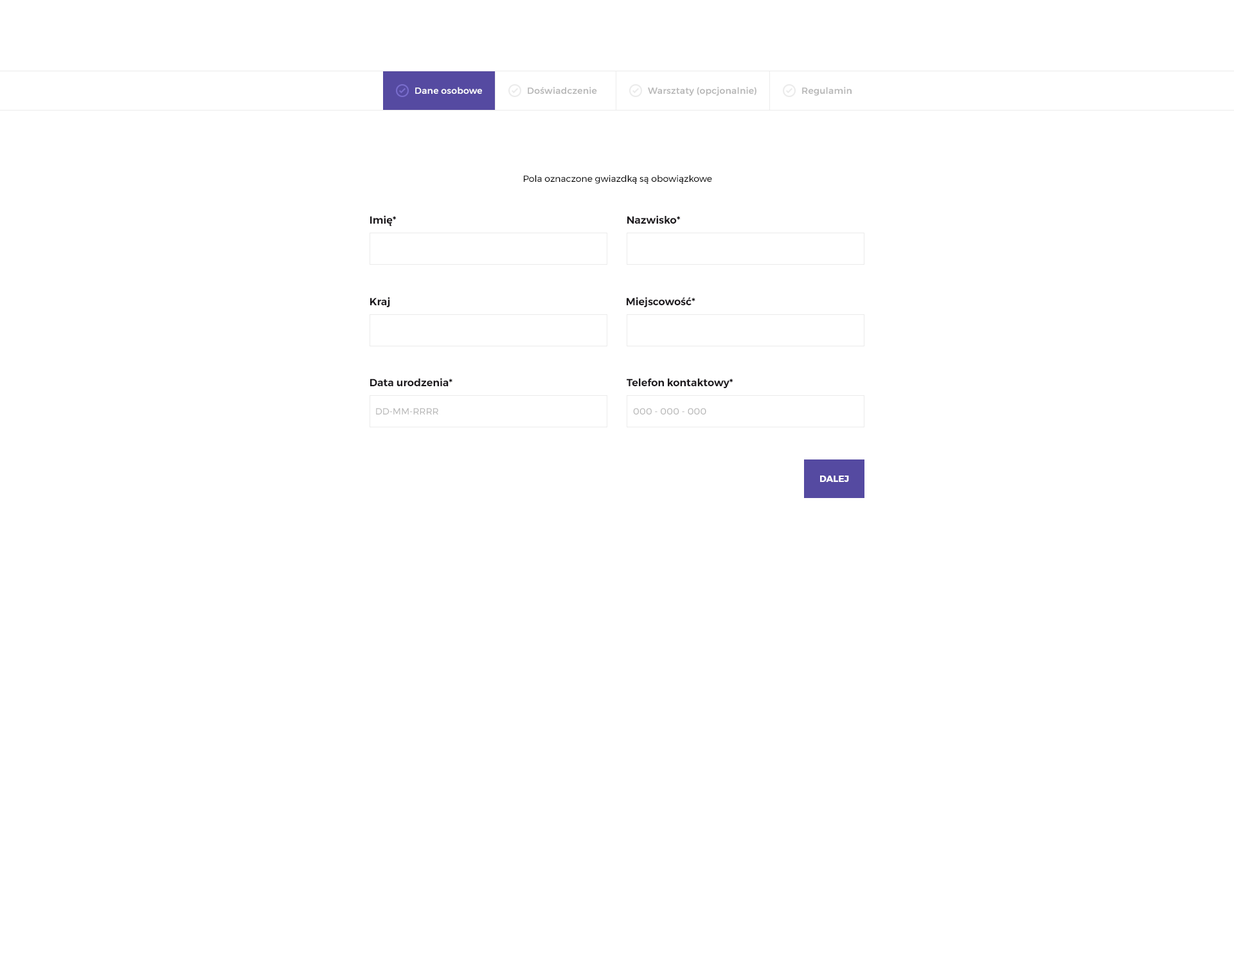
<style>
.page{position:relative;width:1234px;height:980px;background:#ffffff}
.page>*{position:absolute;margin:0}
.t1{font:9px "Montserrat-Medium";letter-spacing:0.015em;color:#ffffff}
.t2{font:9px "Montserrat-Medium";letter-spacing:0.015em;color:#b6b6b6}
.t3{font:9px "Montserrat-Regular";color:#000000}
.t4{font:10.3px "Montserrat-SemiBold";color:#1a171b}
.t5{font:9px "Montserrat-Regular";color:#b6b6b6}
.t6{font:9px "Montserrat-Bold";color:#ffffff;text-transform:uppercase}
</style>
<div class="page">
<p class="t1" style="left:415px;top:87px;width:67px;height:7px">Dane osobowe</p>
<p class="t2" style="left:528px;top:87px;width:69px;height:7px">Doświadczenie</p>
<p class="t2" style="left:648px;top:87px;width:109px;height:9px">Warsztaty (opcjonalnie)</p>
<p class="t2" style="left:802px;top:87px;width:50px;height:9px">Regulamin</p>
<p class="t3" style="left:524px;top:175px;width:188px;height:9px">Pola oznaczone gwiazdką są obowiązkowe</p>
<p class="t4" style="left:370px;top:215px;width:27px;height:11px">Imię*</p>
<p class="t4" style="left:627px;top:215px;width:54px;height:9px">Nazwisko*</p>
<p class="t4" style="left:370px;top:297px;width:20px;height:10px">Kraj</p>
<p class="t4" style="left:627px;top:297px;width:69px;height:10px">Miejscowość*</p>
<p class="t4" style="left:370px;top:378px;width:83px;height:8px">Data urodzenia*</p>
<p class="t4" style="left:627px;top:379px;width:106px;height:9px">Telefon kontaktowy*</p>
<p class="t5" style="left:376px;top:408px;width:62px;height:7px">DD-MM-RRRR</p>
<p class="t5" style="left:633px;top:408px;width:73px;height:7px">000 - 000 - 000</p>
<p class="t6" style="left:820px;top:476px;width:29px;height:6px">DALEJ</p>
</div>
